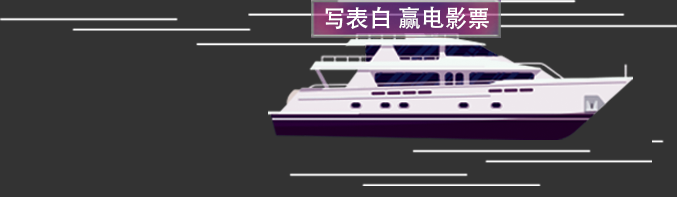
<style>
.page{position:relative;width:677px;height:197px;background:#333333}
.page>*{position:absolute;margin:0}
.t1{font:24px "AdobeHeitiStd-Regular";letter-spacing:0.02em;color:#ffffff;scale:0.95 1}
</style>
<div class="page">
<p class="t1" style="left:325px;top:6px;width:164px;height:24px">写表白 赢电影票</p>
</div>
